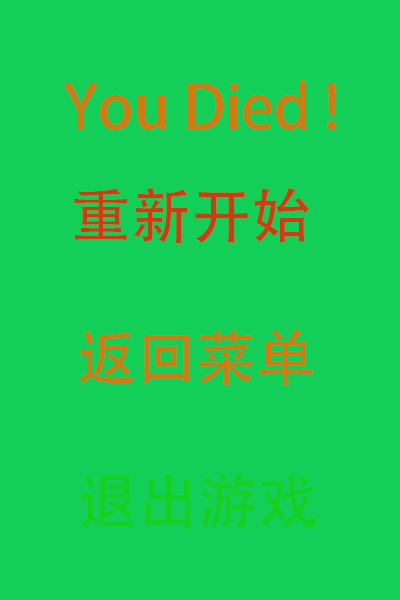
<style>
.page{position:relative;width:400px;height:600px;background:#13cf58}
.page>*{position:absolute;margin:0}
.t1{font:60px "AdobeHeitiStd-Regular";color:#cf7a13}
.t2{font:60px "AdobeHeitiStd-Regular";color:#cf3b13}
.t3{font:60px "AdobeHeitiStd-Regular";color:#16cf1f}
</style>
<div class="page">
<p class="t1" style="left:63px;top:80px;width:273px;height:50px">You Died !</p>
<p class="t2" style="left:74px;top:187px;width:235px;height:56px">重新开始</p>
<p class="t1" style="left:79px;top:329px;width:234px;height:57px">返回菜单</p>
<p class="t3" style="left:81px;top:473px;width:235px;height:56px">退出游戏</p>
</div>
